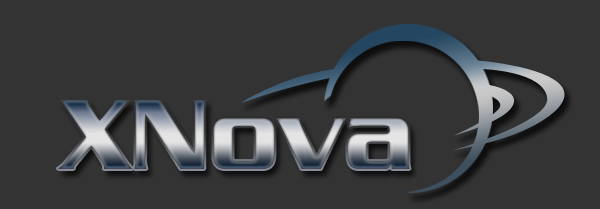
<style>
.page{position:relative;width:600px;height:209px;background:#333333}
.page>*{position:absolute;margin:0}
.t1{font:108px "Serpentine-Medium"}
</style>
<div class="page">
<p class="t1" style="left:57px;top:100px;width:353px;height:69px">XNova</p>
</div>
